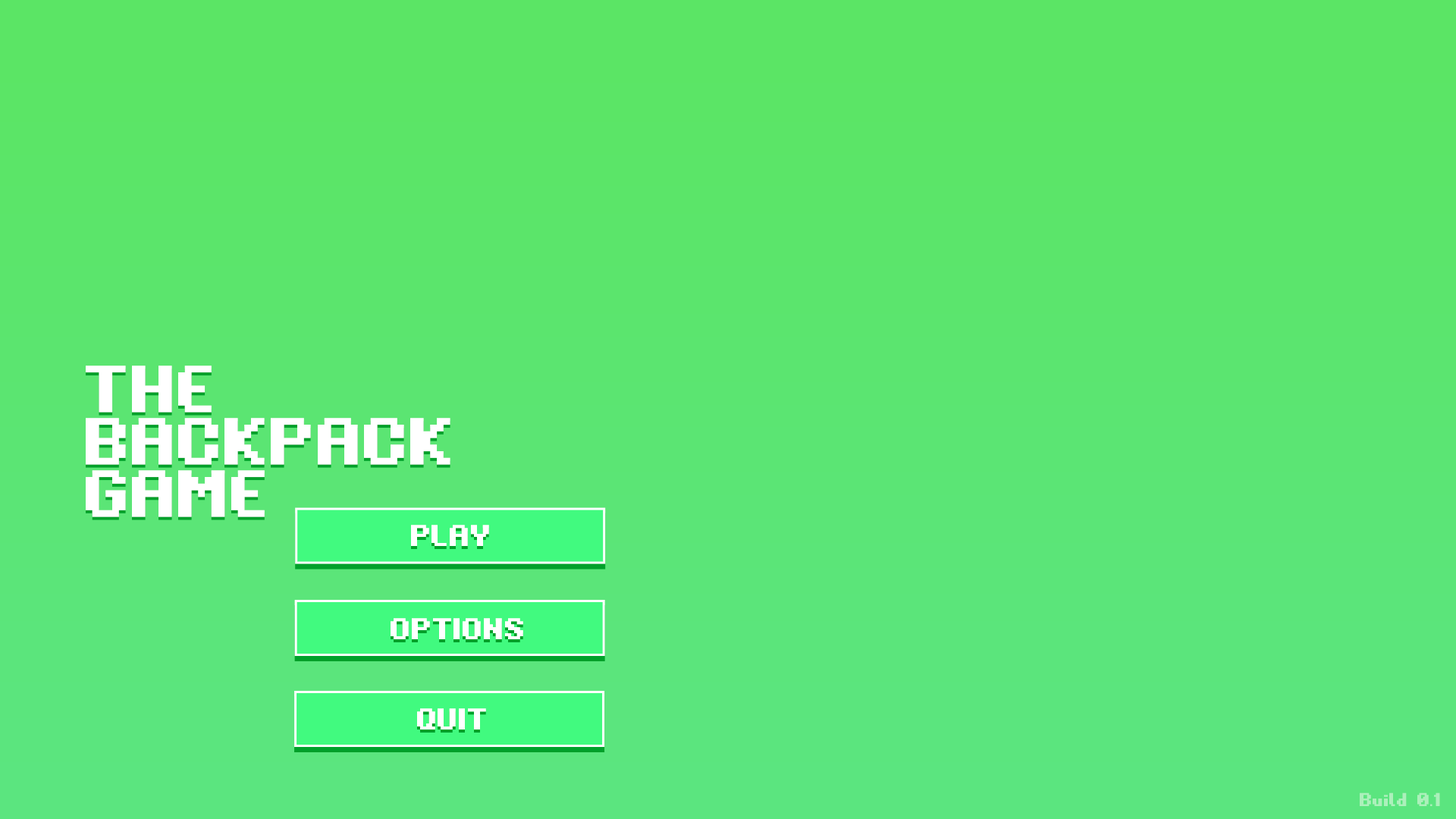
<style>
.page{position:relative;width:1456px;height:819px}
.page>*{position:absolute;margin:0}
.t1{font:106.1px/52.3px "1980XX";color:#ffffff}
.t2{font:48.1px "1980XX";color:#ffffff}
.t3{font:29.9px "1980XX";color:#acf0bb}
</style>
<div class="page">
<p class="t1" style="left:86px;top:366px;width:364px;height:151px">THE <br>BACKPACK <br>GAME</p>
<p class="t2" style="left:411px;top:525px;width:78px;height:21px">PLAY</p>
<p class="t2" style="left:391px;top:618px;width:132px;height:21px">OPTIONS</p>
<p class="t2" style="left:417px;top:708px;width:69px;height:22px">QUIT</p>
<p class="t3" style="left:1360px;top:792px;width:80px;height:14px">Build 0.1</p>
</div>
